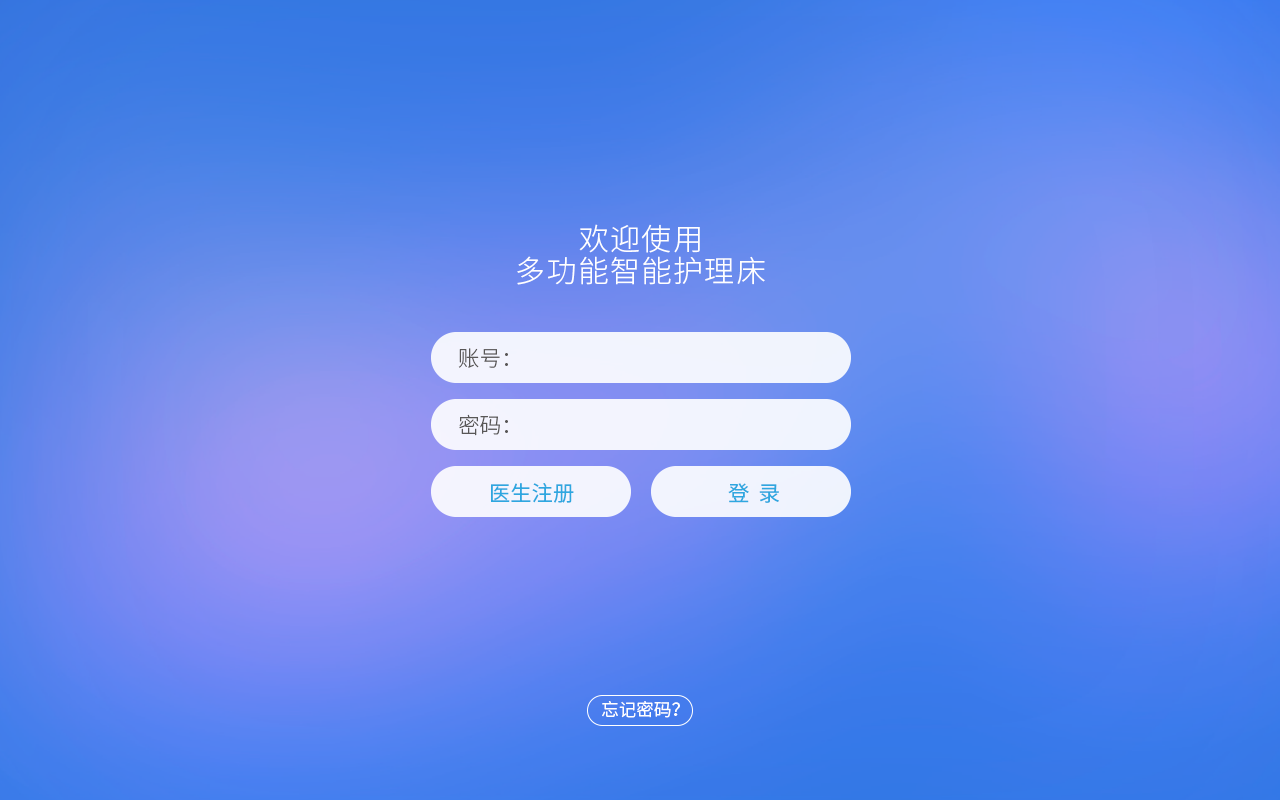
<style>
.page{position:relative;width:1280px;height:800px}
.page>*{position:absolute;margin:0}
.t1{font:30.1px/32.6px "SourceHanSansCN-Light";letter-spacing:0.05em;color:#ffffff}
.t2{font:21.3px "SourceHanSansCN-Light";color:#595757}
.t3{font:21.3px "SourceHanSansCN-Regular";color:#2ea7e0}
.t4{font:17.5px "SourceHanSansCN-Normal";color:#ffffff}
</style>
<div class="page">
<p class="t1" style="left:517px;top:224px;width:248px;height:61px;text-align:center">欢迎使用<br>多功能智能护理床</p>
<p class="t2" style="left:458px;top:348px;width:50px;height:20px">账号：</p>
<p class="t2" style="left:459px;top:414px;width:49px;height:22px">密码：</p>
<p class="t3" style="left:491px;top:483px;width:83px;height:20px">医生注册</p>
<p class="t3" style="left:728px;top:483px;width:51px;height:20px">登  录</p>
<p class="t4" style="left:602px;top:701px;width:78px;height:17px">忘记密码？</p>
</div>
